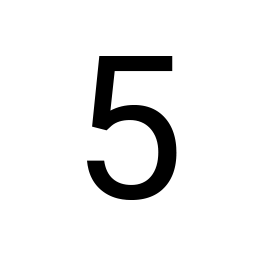
<style>
.page{position:relative;width:256px;height:256px;background:#ffffff}
.page>*{position:absolute;margin:0}
.t1{font:200px "Roboto-Regular";color:#000000}
</style>
<div class="page">
<p class="t1" style="left:87px;top:56px;width:90px;height:144px">5</p>
</div>
